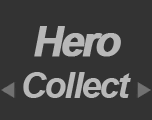
<style>
.page{position:relative;width:152px;height:120px;background:#333333}
.page>*{position:absolute;margin:0}
.t1{font:42.3px "Arial-BoldMT";letter-spacing:-0.1em;color:#b8b8b8;font-weight:bold;font-style:italic}
.t2{font:36px "Arial-BoldItalicMT";letter-spacing:-0.05em;color:#b8b8b8}
</style>
<div class="page">
<p class="t1" style="left:34px;top:26px;width:87px;height:31px">Hero</p>
<p class="t2" style="left:23px;top:72px;width:108px;height:26px">Collect</p>
</div>
